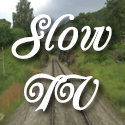
<style>
.page{position:relative;width:125px;height:125px}
.page>*{position:absolute;margin:0}
.t1{font:50px "Carrington";color:#ffffff}
</style>
<div class="page">
<p class="t1" style="left:11px;top:14px;width:101px;height:98px;text-align:center">Slow<br>TV</p>
</div>
